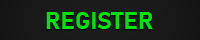
<style>
.page{position:relative;width:200px;height:40px}
.page>*{position:absolute;margin:0}
.t1{font:24px "Bahnschrift-Bold";color:#05e010}
</style>
<div class="page">
<p class="t1" style="left:46px;top:12px;width:107px;height:17px">REGISTER</p>
</div>
